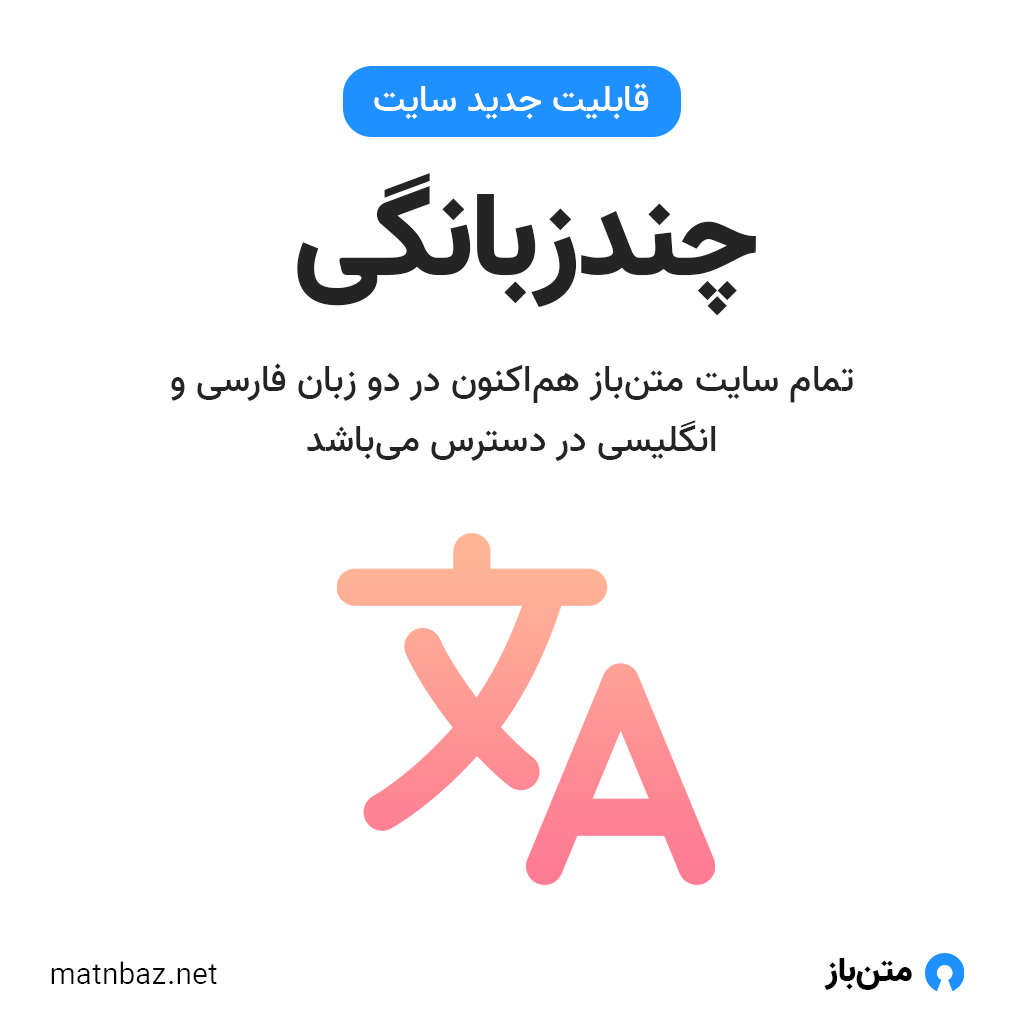
<style>
.page{position:relative;width:1024px;height:1024px;background:#ffffff}
.page>*{position:absolute;margin:0}
.t1{font:37.4px "Vazir-Medium";color:#ffffff}
.t2{font:118.9px "Vazir-Black";color:#242424}
.t3{font:37.4px/59.9px "Vazir-Medium";color:#242424}
.t4{font:30px "Vazir-Light";color:#000000}
.t5{font:34.2px "Vazir-Black";color:#000000}
</style>
<div class="page">
<p class="t1" style="left:374px;top:83px;width:275px;height:36px">قابلیت جدید سایت</p>
<p class="t2" style="left:297px;top:173px;width:459px;height:143px">چندزبانگی</p>
<p class="t3" style="left:171px;top:363px;width:683px;height:98px;text-align:center">تمام سایت متن‌باز هم‌اکنون در دو زبان فارسی و انگلیسی در دسترس می‌باشد</p>
<p class="t4" style="left:51px;top:961px;width:166px;height:23px">matnbaz.net</p>
<p class="t5" style="left:824px;top:958px;width:88px;height:32px">متن‌باز</p>
</div>
